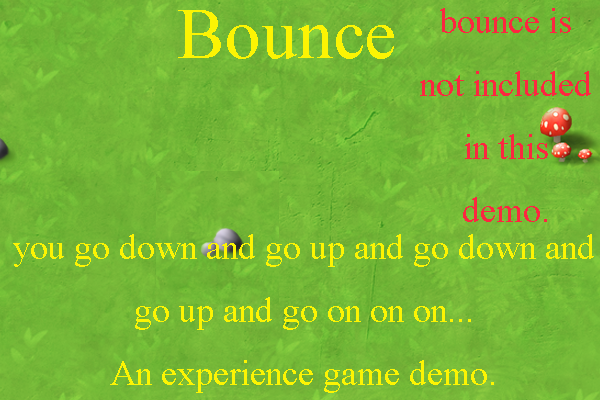
<style>
.page{position:relative;width:600px;height:400px}
.page>*{position:absolute;margin:0}
.t1{font:72px "TimesNewRomanPSMT";color:#fcf403}
.t2{font:36px "TimesNewRomanPSMT";color:#fc2740}
.t3{font:36px "TimesNewRomanPSMT";color:#fcf403}
</style>
<div class="page">
<p class="t1" style="left:178px;top:10px;width:216px;height:49px">Bounce</p>
<p class="t2" style="left:420px;top:8px;width:171px;height:214px;text-align:center">bounce is not included in this demo.</p>
<p class="t3" style="left:13px;top:234px;width:581px;height:159px;text-align:center">you go down and go up and go down and go up and go on on on...<br>An experience game demo.</p>
</div>
